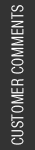
<style>
.page{position:relative;width:35px;height:150px;background:#333333}
.page>*{position:absolute;margin:0}
.t1{font:16px "HeaveneticaCond4LtSH";letter-spacing:0.05em;color:#ffffff;text-transform:uppercase;scale:0.92 1}
</style>
<div class="page">
<p class="t1" style="left:11px;top:5px;width:13px;height:140px;rotate:-90deg">customer comments</p>
</div>
